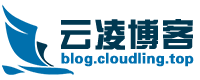
<style>
.page{position:relative;width:200px;height:80px;background:#ffffff}
.page>*{position:absolute;margin:0}
.t1{font:33.3px "FZZYJW--GB1-0";color:#003851;font-weight:bold}
.t2{font:14.6px "FZZYJW--GB1-0";color:#0070af;font-weight:bold}
</style>
<div class="page">
<p class="t1" style="left:61px;top:19px;width:132px;height:31px">云凌博客</p>
<p class="t2" style="left:61px;top:52px;width:133px;height:15px">blog.cloudling.top</p>
</div>
